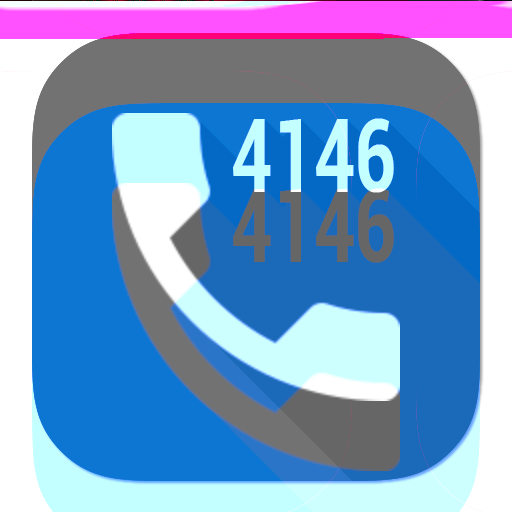
<style>
.page{position:relative;width:512px;height:512px}
.page>*{position:absolute;margin:0}
.t1{font:100.8px "Roboto-Bold";color:#c4ffff;scale:0.71 1}
</style>
<div class="page">
<p class="t1" style="left:233px;top:117px;width:161px;height:75px">4146</p>
</div>
